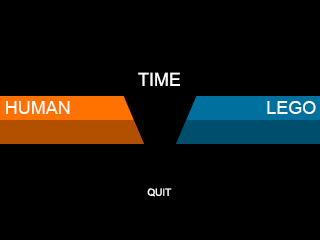
<style>
.page{position:relative;width:320px;height:240px;background:#000000}
.page>*{position:absolute;margin:0}
.t1{font:18px "ArialUnicodeMS";color:#ffffff}
.t2{font:10px "ArialUnicodeMS";color:#ffffff}
</style>
<div class="page">
<p class="t1" style="left:138px;top:72px;width:42px;height:14px">TIME</p>
<p class="t1" style="left:6px;top:101px;width:64px;height:13px">HUMAN</p>
<p class="t1" style="left:267px;top:101px;width:49px;height:13px">LEGO</p>
<p class="t2" style="left:147px;top:188px;width:25px;height:9px">QUIT</p>
</div>
